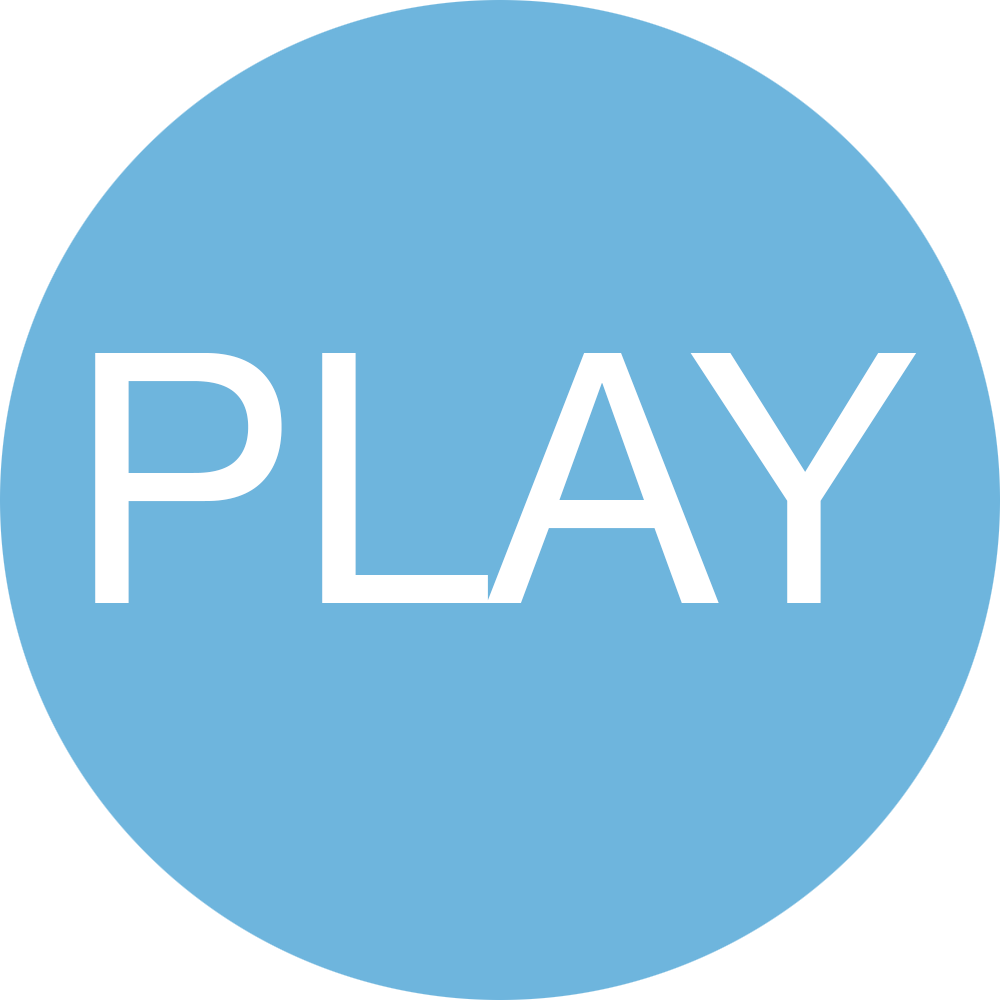
<style>
.page{position:relative;width:1000px;height:1000px;background:#6eb5dd}
.page>*{position:absolute;margin:0}
.t1{font:350px "HelveticaNeue";color:#ffffff}
</style>
<div class="page">
<p class="t1" style="left:95px;top:353px;width:822px;height:250px">PLAY</p>
</div>
